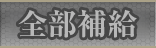
<style>
.page{position:relative;width:156px;height:48px;background:#464646}
.page>*{position:absolute;margin:0}
.t1{font:30px "RyuminPr6N-ExBold";color:#b8b8b8}
</style>
<div class="page">
<p class="t1" style="left:18px;top:9px;width:119px;height:29px">全部補給</p>
</div>
